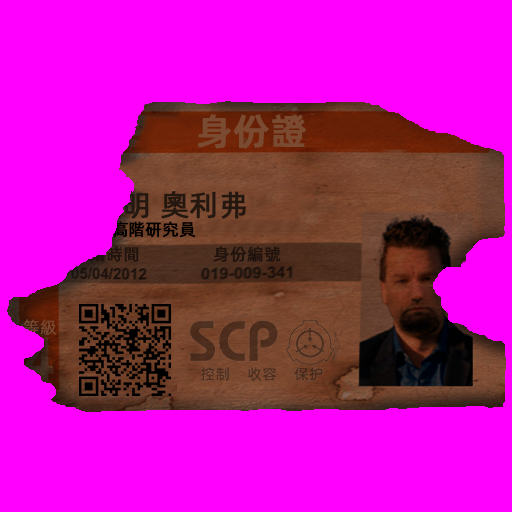
<style>
.page{position:relative;width:512px;height:512px;background:#ff00ff}
.page>*{position:absolute;margin:0}
.t1{font:36.4px "AlibabaPuHuiTiM";color:#7a4a31;font-weight:bold}
.t2{font:29.2px "AlibabaPuHuiTiR";color:#231710;font-weight:bold}
.t3{font:16.7px "AlibabaPuHuiTiR";color:#000000;font-weight:bold}
.t4{font:16.7px "AlibabaPuHuiTiR";color:#20130d;font-weight:bold}
.t5{font:16.7px "AlibabaPuHuiTiL";color:#7a4a31;font-weight:bold}
</style>
<div class="page">
<p class="t1" style="left:197px;top:114px;width:109px;height:35px">身份證</p>
<p class="t2" style="left:63px;top:191px;width:183px;height:28px">本傑明 奧利弗</p>
<p class="t3" style="left:61px;top:221px;width:135px;height:17px">職位：高階研究員</p>
<p class="t4" style="left:213px;top:246px;width:68px;height:17px">身份編號</p>
<p class="t5" style="left:23px;top:319px;width:34px;height:16px">等級</p>
</div>
